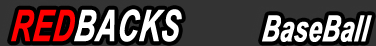
<style>
.page{position:relative;width:376px;height:46px;background:#333333}
.page>*{position:absolute;margin:0}
.t1{font:43.2px "Arial-BoldItalicMT";color:#ff0000;text-transform:uppercase;font-weight:bold;font-style:italic;scale:0.67 1}
.t2{font:43.2px "Arial-BoldItalicMT";color:#ffffff;text-transform:uppercase;font-weight:bold;font-style:italic;scale:0.67 1}
.t3{font:36px "Arial-BoldItalicMT";color:#ffffff;font-weight:bold;font-style:italic;scale:0.67 1}
</style>
<div class="page">
<p class="t1" style="left:11px;top:9px;width:64px;height:33px">Red</p>
<p class="t2" style="left:74px;top:9px;width:108px;height:33px">Backs</p>
<p class="t3" style="left:262px;top:15px;width:110px;height:27px">BaseBall</p>
</div>
